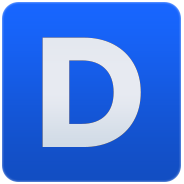
<style>
.page{position:relative;width:184px;height:184px}
.page>*{position:absolute;margin:0}
.t1{font:155.8px "Poppins-Bold";color:#e4e8ef}
</style>
<div class="page">
<p class="t1" style="left:42px;top:37px;width:99px;height:110px">D</p>
</div>
